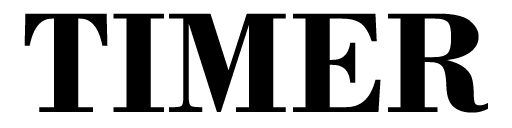
<style>
.page{position:relative;width:512px;height:128px;background:#ffffff}
.page>*{position:absolute;margin:0}
.t1{font:150px "BodoniMT-Bold";color:#010000}
</style>
<div class="page">
<p class="t1" style="left:24px;top:13px;width:464px;height:100px">TIMER</p>
</div>
